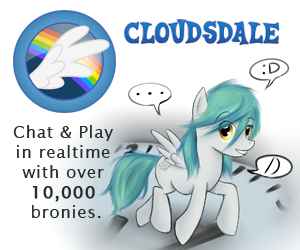
<style>
.page{position:relative;width:300px;height:250px;background:#ffffff}
.page>*{position:absolute;margin:0}
.t1{font:16.7px "LucidaSans";letter-spacing:0.05em;color:#292929}
.t2{font:16.7px "LucidaSans";letter-spacing:0.05em;color:#292929;font-weight:bold}
</style>
<div class="page">
<p class="t1" style="left:13px;top:125px;width:100px;height:93px;text-align:center">Chat &amp; Play in realtime with over<br><span class="t2">10,000<br></span> bronies.</p>
</div>
